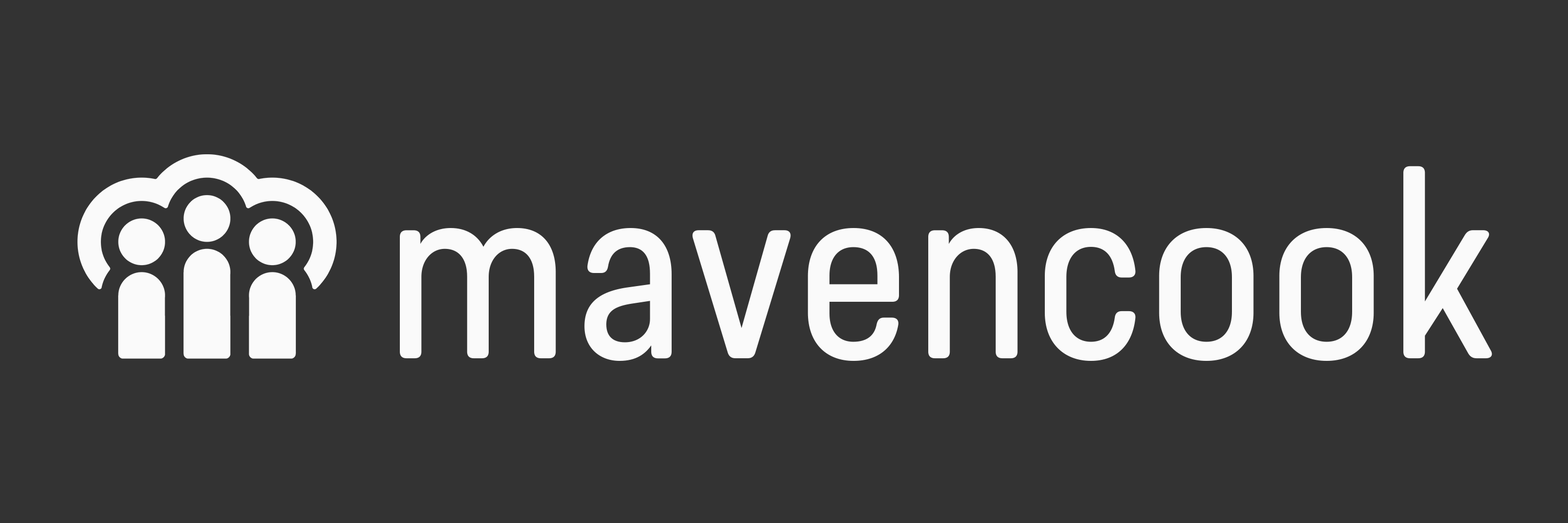
<style>
.page{position:relative;width:1568px;height:523px;background:#333333}
.page>*{position:absolute;margin:0}
.t1{font:250.9px "PredigeRounded-Regular";color:#fafafa}
</style>
<div class="page">
<p class="t1" style="left:400px;top:166px;width:1092px;height:195px">mavencook</p>
</div>
